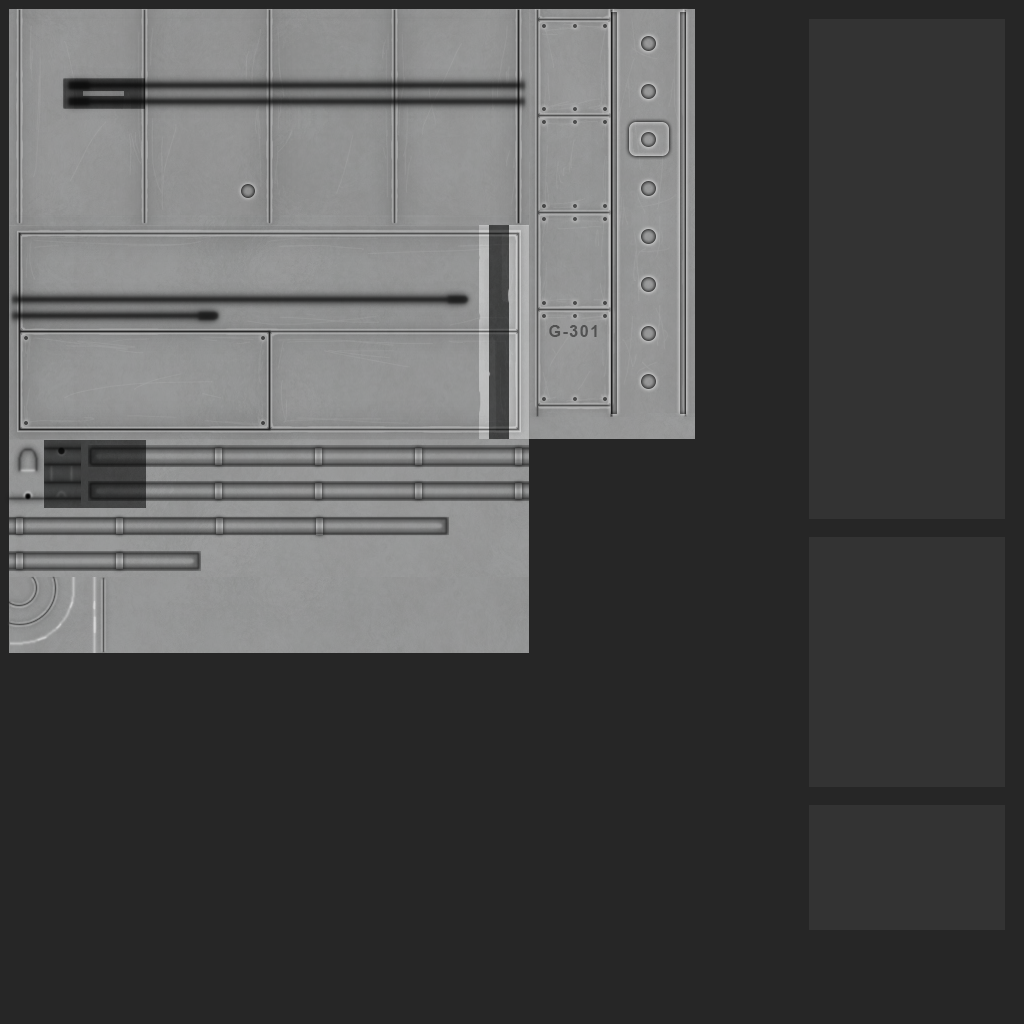
<style>
.page{position:relative;width:1024px;height:1024px;background:#262626}
.page>*{position:absolute;margin:0}
.t1{font:16px "Arial-BoldMT";letter-spacing:0.1em;color:#515152}
</style>
<div class="page">
<p class="t1" style="left:549px;top:325px;width:48px;height:12px">G-301</p>
</div>
